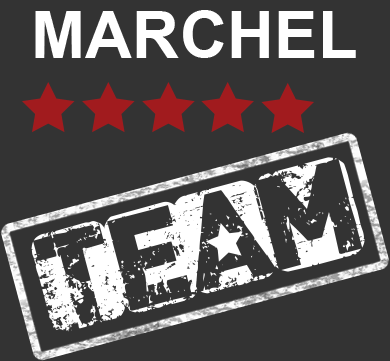
<style>
.page{position:relative;width:390px;height:361px;background:#333333}
.page>*{position:absolute;margin:0}
.t1{font:65.5px "Arial-BoldMT";color:#ffffff}
.t2{font:118.6px "CFPunkisnotDead-Regular";color:#ffffff}
</style>
<div class="page">
<p class="t1" style="left:35px;top:10px;width:321px;height:48px">MARCHEL</p>
<p class="t2" style="left:31px;top:157px;width:334px;height:175px;rotate:-15deg">team</p>
</div>
